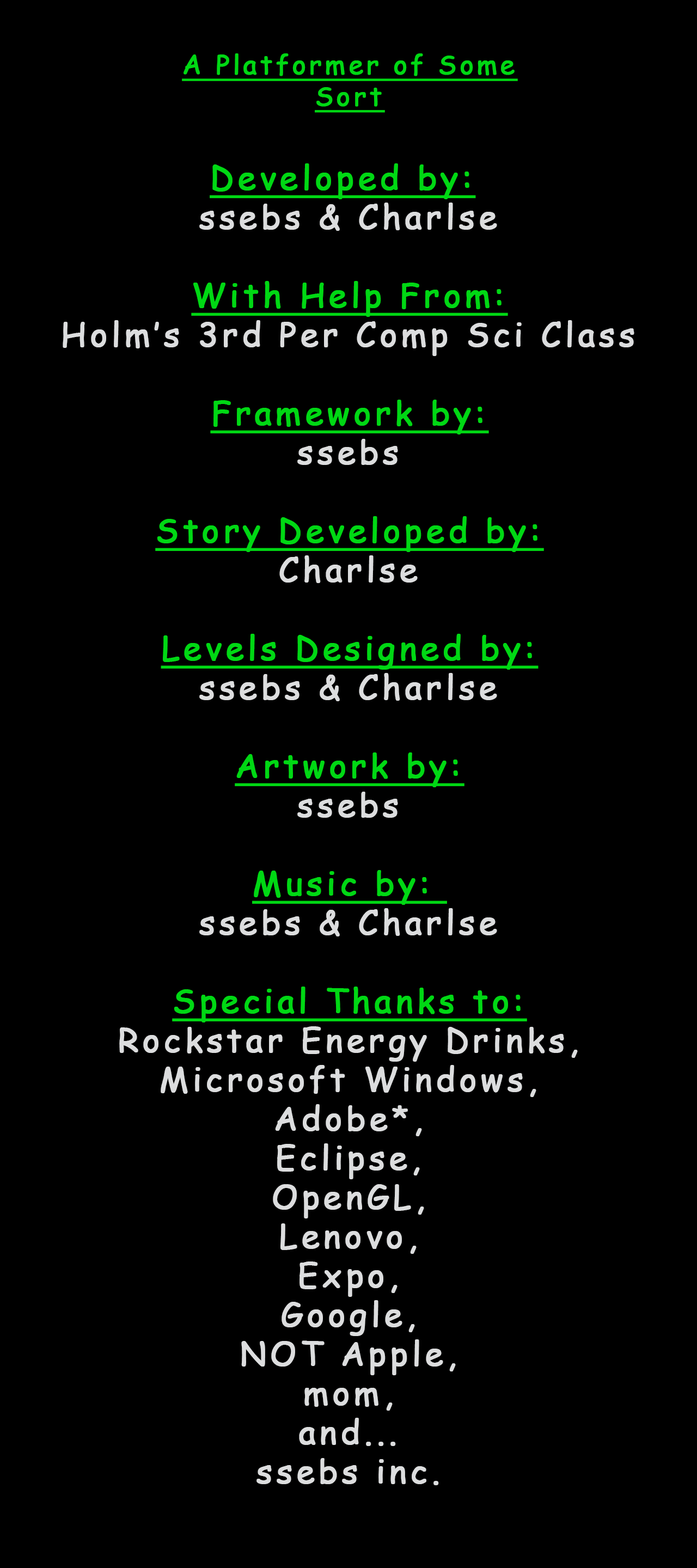
<style>
.page{position:relative;width:697px;height:1568px;background:#000000}
.page>*{position:absolute;margin:0}
.t1{font:26.1px "ComicSansMS";letter-spacing:0.1em;color:#00d814;font-weight:bold;text-decoration:underline}
.t2{font:32.7px "ComicSansMS";letter-spacing:0.1em;color:#dcddde;font-weight:bold}
.t3{font:32.7px "ComicSansMS";letter-spacing:0.1em;color:#00d814;font-weight:bold;text-decoration:underline}
</style>
<div class="page">
<p class="t1" style="left:182px;top:53px;width:336px;height:60px;text-align:center">A Platformer of Some Sort</p>
<p class="t2" style="left:63px;top:163px;width:571px;height:1322px;text-align:center"><span class="t3">Developed by: <br></span>ssebs &amp; Charlse<br><br><span class="t3">With Help From:<br></span>Holm’s 3rd Per Comp Sci Class<br><br><span class="t3">Framework by:<br></span>ssebs<br><br><span class="t3">Story Developed by:<br></span>Charlse<br><br><span class="t3">Levels Designed by:<br></span>ssebs &amp; Charlse<br><br><span class="t3">Artwork by:<br></span>ssebs<br><br><span class="t3">Music by: <br></span>ssebs &amp; Charlse<br><br><span class="t3">Special Thanks to:<br></span>Rockstar Energy Drinks,<br>Microsoft Windows,<br>Adobe*,<br>Eclipse,<br>OpenGL,<br>Lenovo,<br>Expo,<br>Google,<br>NOT Apple,<br>mom,<br>and...<br>ssebs inc.</p>
</div>
